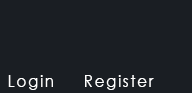
<style>
.page{position:relative;width:192px;height:93px;background:#1a1e23}
.page>*{position:absolute;margin:0}
.t1{font:15.6px "CenturyGothic";letter-spacing:0.1em;color:#ffffff}
</style>
<div class="page">
<p class="t1" style="left:8px;top:75px;width:45px;height:15px">Login</p>
<p class="t1" style="left:85px;top:75px;width:69px;height:15px">Register</p>
</div>
